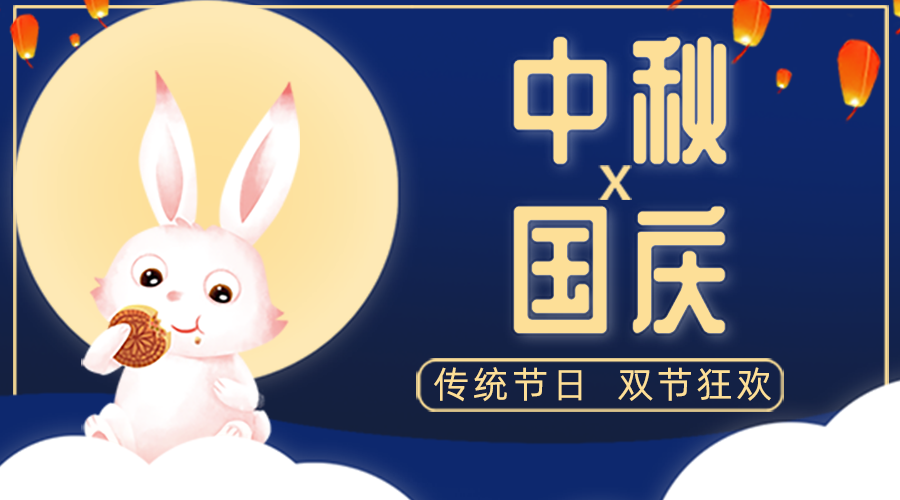
<style>
.page{position:relative;width:900px;height:500px}
.page>*{position:absolute;margin:0}
.t1{font:137.2px "Ö£Çì¿Æ»ÆÓÍÌåRegular";letter-spacing:0.1em;color:#fddf97}
.t2{font:36.5px "AlibabaPuHuiTi-Regular";letter-spacing:0.1em;color:#fddf97}
</style>
<div class="page">
<p class="t1" style="left:514px;top:37px;width:212px;height:127px">中秋</p>
<p class="t1" style="left:514px;top:206px;width:211px;height:127px">国庆</p>
<p class="t2" style="left:434px;top:367px;width:337px;height:35px">传统节日  双节狂欢</p>
</div>
